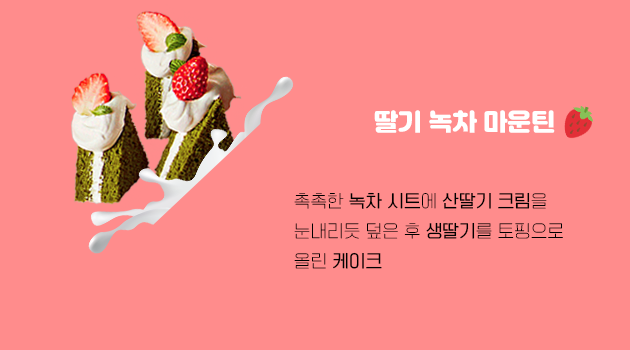
<style>
.page{position:relative;width:630px;height:350px;background:#ff8c8c}
.page>*{position:absolute;margin:0}
.t1{font:24px "Jalnan";color:#ffffff}
.t2{font:17px/30px "TTOmniGothicT";color:#000000}
.t3{font:17px/30px "TTOmniGothicM";color:#000000}
</style>
<div class="page">
<p class="t1" style="left:374px;top:110px;width:181px;height:23px">딸기 녹차 마운틴</p>
<p class="t2" style="left:294px;top:192px;width:269px;height:77px">촉촉한 <span class="t3">녹차 시트</span>에 <span class="t3">산딸기 크림</span>을 <br>눈내리듯 덮은 후 <span class="t3">생딸기</span>를 토핑으로 <br>올린 <span class="t3">케이크</span></p>
</div>
